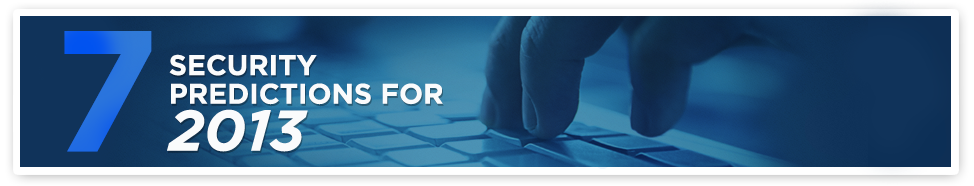
<style>
.page{position:relative;width:974px;height:186px}
.page>*{position:absolute;margin:0}
.t1{font:171.7px "Gotham-Bold";color:#2570df;text-transform:uppercase}
.t2{font:28.3px/28.6px "Gotham-Bold";color:#fafbfc;text-transform:uppercase}
.t3{font:28.3px "Gotham-Bold";color:#fafbfc;text-transform:uppercase}
.t4{font:57.2px/46.9px "Gotham-BoldItalic";color:#fafbfc;text-transform:uppercase}
</style>
<div class="page">
<p class="t1" style="left:64px;top:31px;width:88px;height:121px">7</p>
<p class="t1" style="left:64px;top:31px;width:88px;height:121px">7</p>
<p class="t2" style="left:167px;top:54px;width:276px;height:98px"><span class="t3">security<br></span>Predictions For<br><span class="t4">2013</span></p>
</div>
